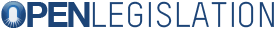
<style>
.page{position:relative;width:275px;height:29px;background:#ffffff}
.page>*{position:absolute;margin:0}
.t1{font:35px "HelveticaNeue-Bold";letter-spacing:-0.07em;color:#1c4477}
.t2{font:34.7px "TSTARPRO";letter-spacing:0.03em;color:#1c4477}
</style>
<div class="page">
<p class="t1" style="left:1px;top:1px;width:89px;height:27px">OPEN</p>
<p class="t2" style="left:92px;top:1px;width:182px;height:27px">LEGISLATION</p>
</div>
